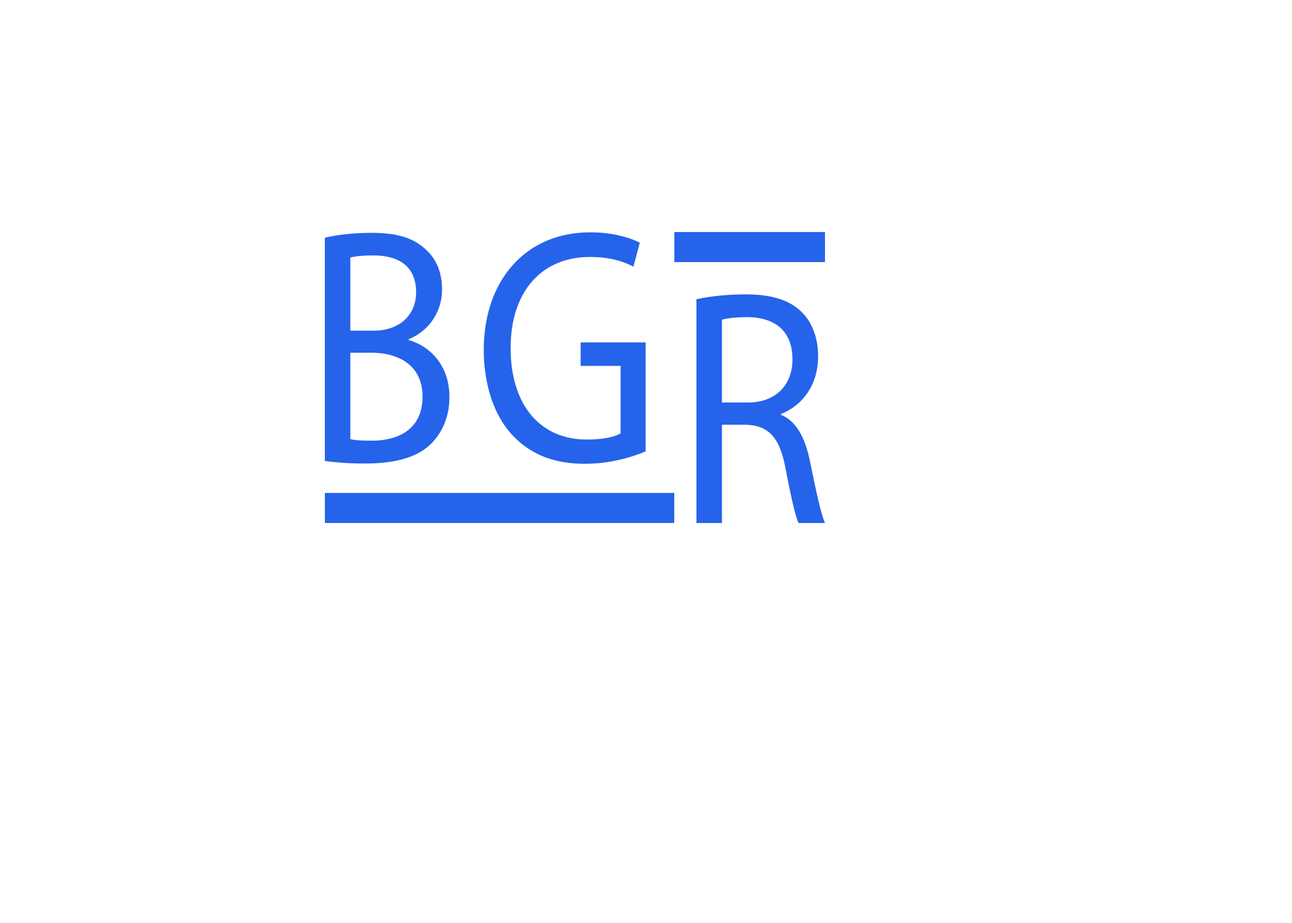
<style>
.page{position:relative;width:1292px;height:923px;background:#ffffff}
.page>*{position:absolute;margin:0}
.t1{font:336.6px "MyriadConceptRoman-Regular";letter-spacing:0.04em;color:#2563eb;font-weight:bold;scale:0.87 1}
</style>
<div class="page">
<p class="t1" style="left:325px;top:232px;width:321px;height:232px">BG</p>
<p class="t1" style="left:696px;top:294px;width:129px;height:229px">R</p>
</div>
